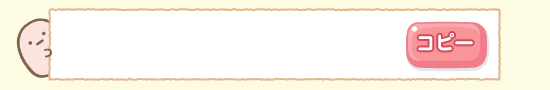
<style>
.page{position:relative;width:550px;height:90px;background:#ffffff}
.page>*{position:absolute;margin:0}
.t1{font:20px "DFMaruGothic-SB-WINP-RKSJ-H";letter-spacing:0.01em;color:#ffffff;scale:0.95 1}
</style>
<div class="page">
<p class="t1" style="left:418px;top:33px;width:55px;height:18px">コピー</p>
</div>
